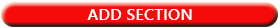
<style>
.page{position:relative;width:280px;height:28px;background:#f60b0b}
.page>*{position:absolute;margin:0}
.t1{font:16.4px "YuGothicUI-Bold";color:#ffffff}
</style>
<div class="page">
<p class="t1" style="left:87px;top:9px;width:105px;height:11px">ADD SECTION</p>
</div>
